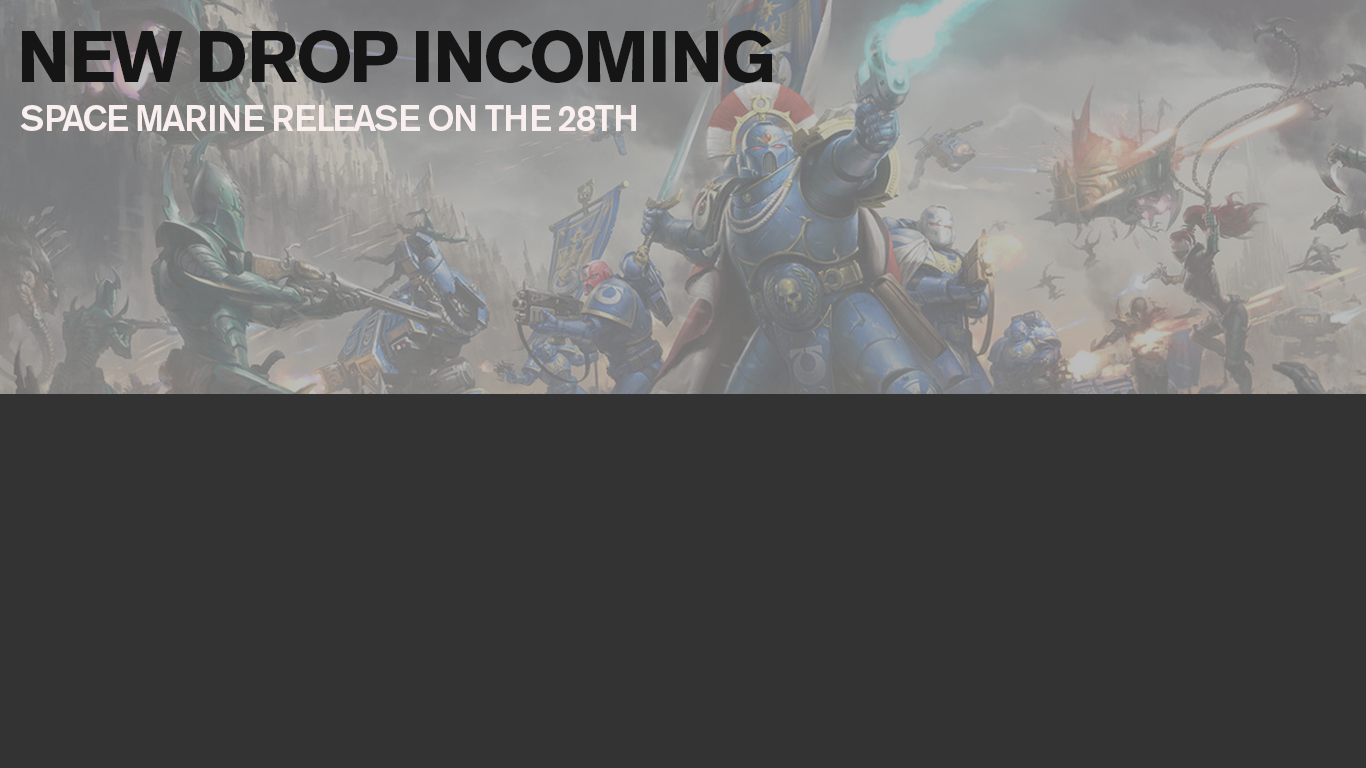
<style>
.page{position:relative;width:1366px;height:768px;background:#333333}
.page>*{position:absolute;margin:0}
.t1{font:72px "AkzidenzGroteskBE-Bold";letter-spacing:-0.05em;color:#151515}
.t2{font:36px "AkzidenzGroteskBE-Md";letter-spacing:-0.05em;color:#faefef}
</style>
<div class="page">
<p class="t1" style="left:22px;top:30px;width:750px;height:53px">NEW DROP INCOMING</p>
<p class="t2" style="left:20px;top:105px;width:616px;height:26px">SPACE MARINE RELEASE ON THE 28TH</p>
</div>
